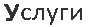
<style>
.page{position:relative;width:89px;height:27px;background:#ffffff}
.page>*{position:absolute;margin:0}
.t1{font:25.8px "Calibri";color:#323232;scale:1.1 1}
.t2{font:25.8px "Calibri";color:#323232;font-weight:bold;scale:1.1 1}
</style>
<div class="page">
<p class="t1" style="left:4px;top:4px;width:78px;height:21px"><span class="t2">У</span>слуги</p>
</div>
